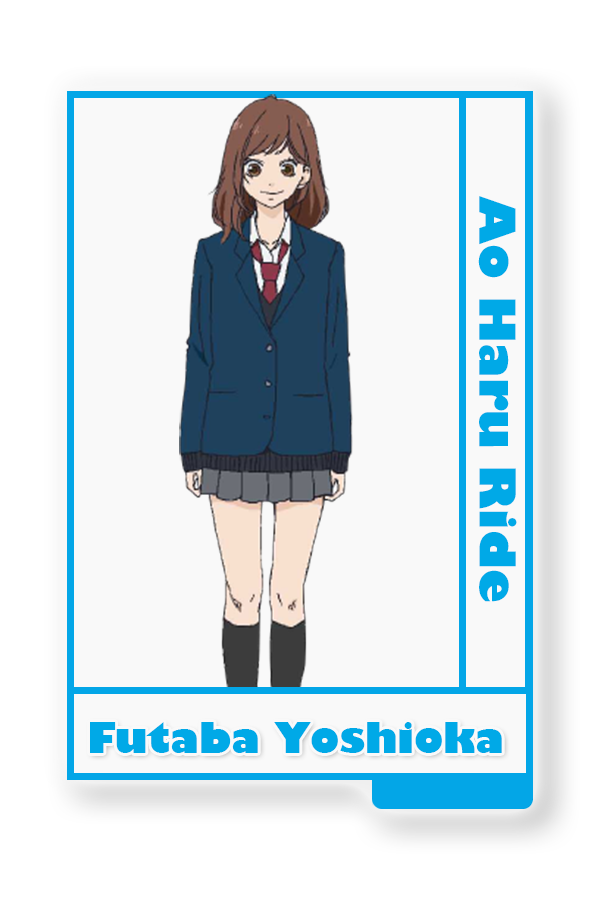
<style>
.page{position:relative;width:600px;height:900px;background:#f9f9f9}
.page>*{position:absolute;margin:0}
.t1{font:48.8px "GillSans-UltraBold";color:#00a9e7}
.t2{font:40.6px "GillSans-UltraBold";color:#00a9e7}
</style>
<div class="page">
<p class="t1" style="left:478px;top:196px;width:39px;height:406px;rotate:90deg">Ao Haru Ride</p>
<p class="t2" style="left:90px;top:722px;width:412px;height:31px">Futaba Yoshioka</p>
</div>
